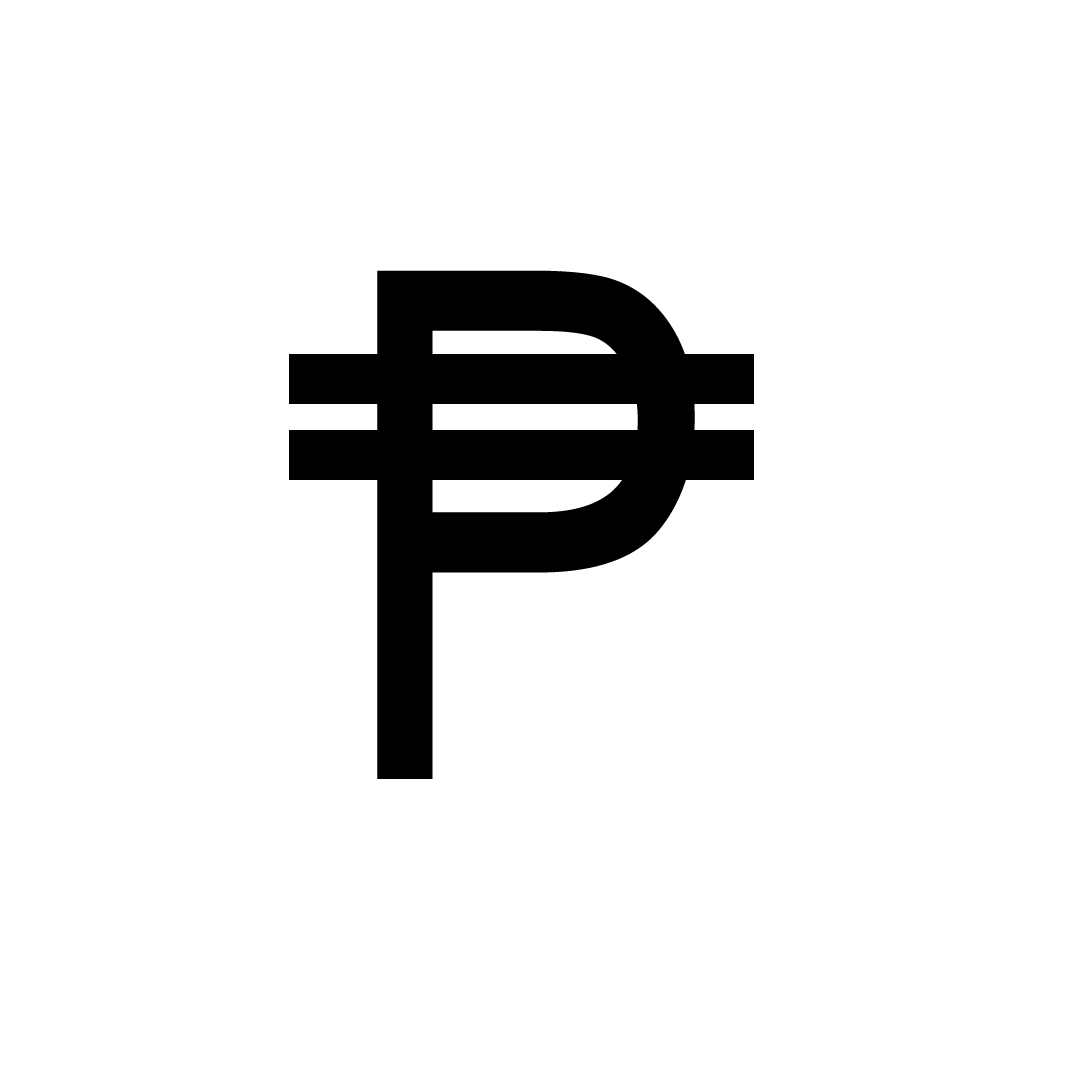
<style>
.page{position:relative;width:1080px;height:1080px;background:#ffffff}
.page>*{position:absolute;margin:0}
.t1{font:710px "ArialNarrow";color:#000000}
</style>
<div class="page">
<p class="t1" style="left:377px;top:270px;width:318px;height:509px">P</p>
</div>
